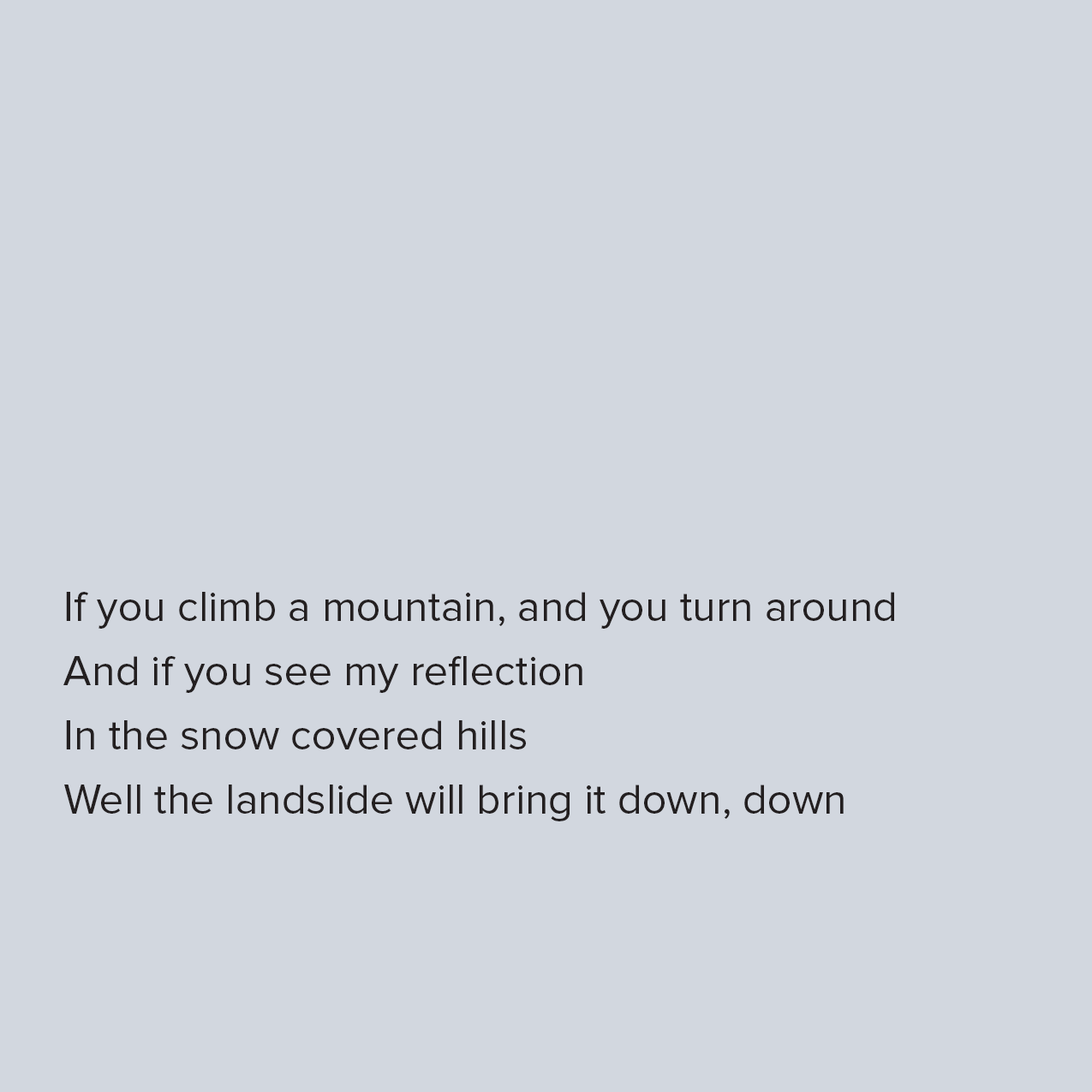
<style>
.page{position:relative;width:1092px;height:1092px;background:#d2d7df}
.page>*{position:absolute;margin:0}
.t1{font:42.8px/64.2px "ProximaNova-Regular";color:#231f20}
</style>
<div class="page">
<p class="t1" style="left:63px;top:592px;width:831px;height:229px">If you climb a mountain, and you turn around<br>And if you see my reflection<br>In the snow covered hills<br>Well the landslide will bring it down, down</p>
</div>
